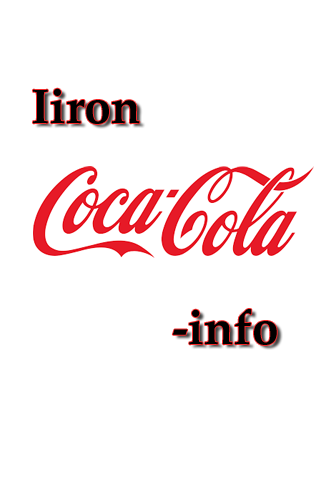
<style>
.page{position:relative;width:320px;height:480px;background:#ffffff}
.page>*{position:absolute;margin:0}
.t1{font:48px "PalatinoLinotype-Bold";color:#000000}
</style>
<div class="page">
<p class="t1" style="left:33px;top:88px;width:107px;height:36px">Iiron</p>
<p class="t1" style="left:172px;top:309px;width:105px;height:36px">-info</p>
</div>
